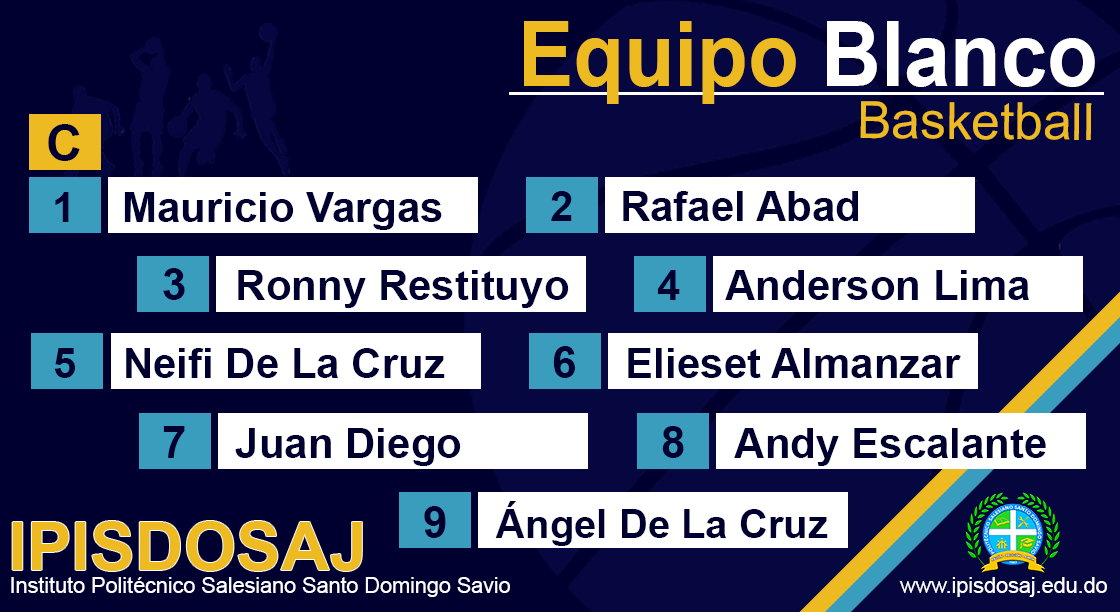
<style>
.page{position:relative;width:1120px;height:612px;background:#000030}
.page>*{position:absolute;margin:0}
.t1{font:90.9px "Arial-BoldMT";color:#eeba22;scale:0.91 1}
.t2{font:90.9px "Arial-BoldMT";color:#ffffff;scale:0.91 1}
.t3{font:51.4px "ArialMT";color:#eeba22}
.t4{font:50px "Arial-BoldMT";color:#000030}
.t5{font:42px "Arial-BoldMT";color:#000030}
.t6{font:44.3px "Arial-BoldMT";color:#000030}
.t7{font:40px "Arial-BoldMT";color:#000030}
.t8{font:67.3px "Arial-BoldMT";color:#eeba22}
.t9{font:21.6px "ArialMT";color:#ffffff}
</style>
<div class="page">
<p class="t1" style="left:524px;top:21px;width:571px;height:83px">Equipo <span class="t2">Blanco</span></p>
<p class="t3" style="left:860px;top:101px;width:232px;height:39px">Basketball</p>
<p class="t4" style="left:48px;top:124px;width:32px;height:37px">C</p>
<p class="t5" style="left:55px;top:192px;width:387px;height:38px">1    Mauricio Vargas</p>
<p class="t5" style="left:551px;top:191px;width:307px;height:30px">2    Rafael Abad</p>
<p class="t5" style="left:163px;top:268px;width:406px;height:40px"><span class="t6">3    </span>Ronny Restituyo</p>
<p class="t5" style="left:657px;top:270px;width:372px;height:30px">4    Anderson Lima</p>
<p class="t5" style="left:54px;top:348px;width:391px;height:30px">5    Neifi De La Cruz</p>
<p class="t5" style="left:553px;top:346px;width:408px;height:32px"><span class="t6">6    </span>Elieset Almanzar</p>
<p class="t5" style="left:163px;top:426px;width:298px;height:40px"><span class="t6">7    </span>Juan Diego</p>
<p class="t5" style="left:662px;top:426px;width:384px;height:40px"><span class="t6">8    </span>Andy Escalante</p>
<p class="t7" style="left:424px;top:501px;width:404px;height:45px"><span class="t6">9    </span>Ángel De La Cruz</p>
<p class="t8" style="left:12px;top:521px;width:350px;height:50px">IPISDOSAJ</p>
<p class="t9" style="left:11px;top:577px;width:1096px;height:20px">Instituto Politécnico Salesiano Santo Domingo Savio                                                                 www.ipisdosaj.edu.do</p>
</div>
